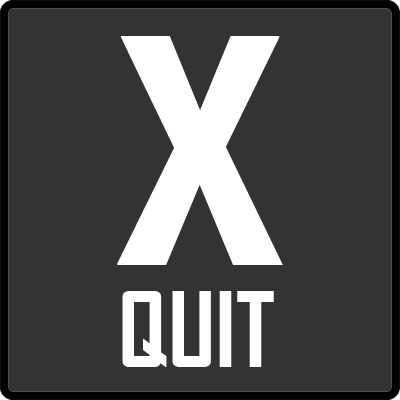
<style>
.page{position:relative;width:400px;height:400px;background:#333333}
.page>*{position:absolute;margin:0}
.t1{font:300px "AgencyFB-Bold";color:#ffffff;scale:1.33 1}
.t2{font:100px "AgencyFB-Bold";color:#ffffff}
</style>
<div class="page">
<p class="t1" style="left:117px;top:36px;width:166px;height:229px">X</p>
<p class="t2" style="left:122px;top:291px;width:152px;height:76px">QUIT</p>
</div>
